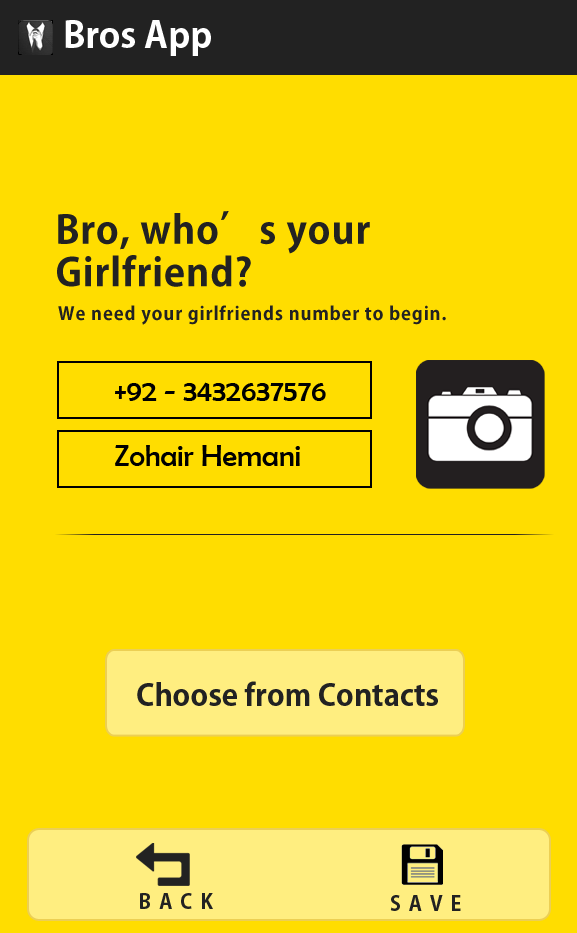
<style>
.page{position:relative;width:577px;height:933px;background:#ffdd00}
.page>*{position:absolute;margin:0}
.t1{font:36px "AdobeGothicStd-Bold";color:#ffffff}
.t2{font:38.3px/42.6px "AdobeGothicStd-Bold";letter-spacing:0.025em;color:#222222}
.t3{font:18px "AdobeGothicStd-Bold";letter-spacing:0.05em;color:#222222}
.t4{font:30px "BerlinSansFB-Reg";color:#000000}
.t5{font:30px "AdobeGothicStd-Bold";color:#222222}
.t6{font:20px "AdobeGothicStd-Bold";letter-spacing:0.4em;color:#222222}
</style>
<div class="page">
<p class="t1" style="left:65px;top:20px;width:146px;height:36px">Bros App</p>
<p class="t2" style="left:57px;top:211px;width:313px;height:76px">Bro, who’s your <br>Girlfriend?</p>
<p class="t3" style="left:58px;top:305px;width:388px;height:20px">We need your girlfriends number to begin.</p>
<p class="t4" style="left:115px;top:382px;width:211px;height:19px">+92 - 3432637576</p>
<p class="t4" style="left:115px;top:445px;width:185px;height:21px">Zohair Hemani</p>
<p class="t5" style="left:137px;top:681px;width:301px;height:25px">Choose from Contacts</p>
<p class="t6" style="left:140px;top:893px;width:73px;height:16px">BACK</p>
<p class="t6" style="left:390px;top:895px;width:71px;height:16px">SAVE</p>
</div>
